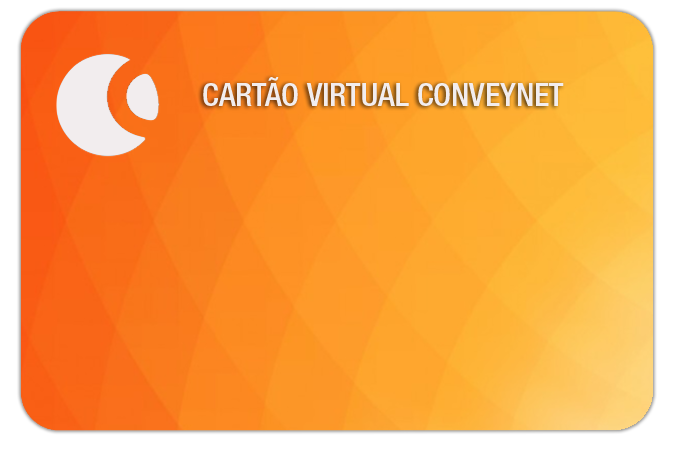
<style>
.page{position:relative;width:679px;height:449px}
.page>*{position:absolute;margin:0}
.t1{font:32px "HelveticaNeueLTPro-MdCn";color:#f2edee;text-transform:uppercase}
</style>
<div class="page">
<p class="t1" style="left:203px;top:77px;width:361px;height:29px">Cartão virtual conveynet</p>
</div>
